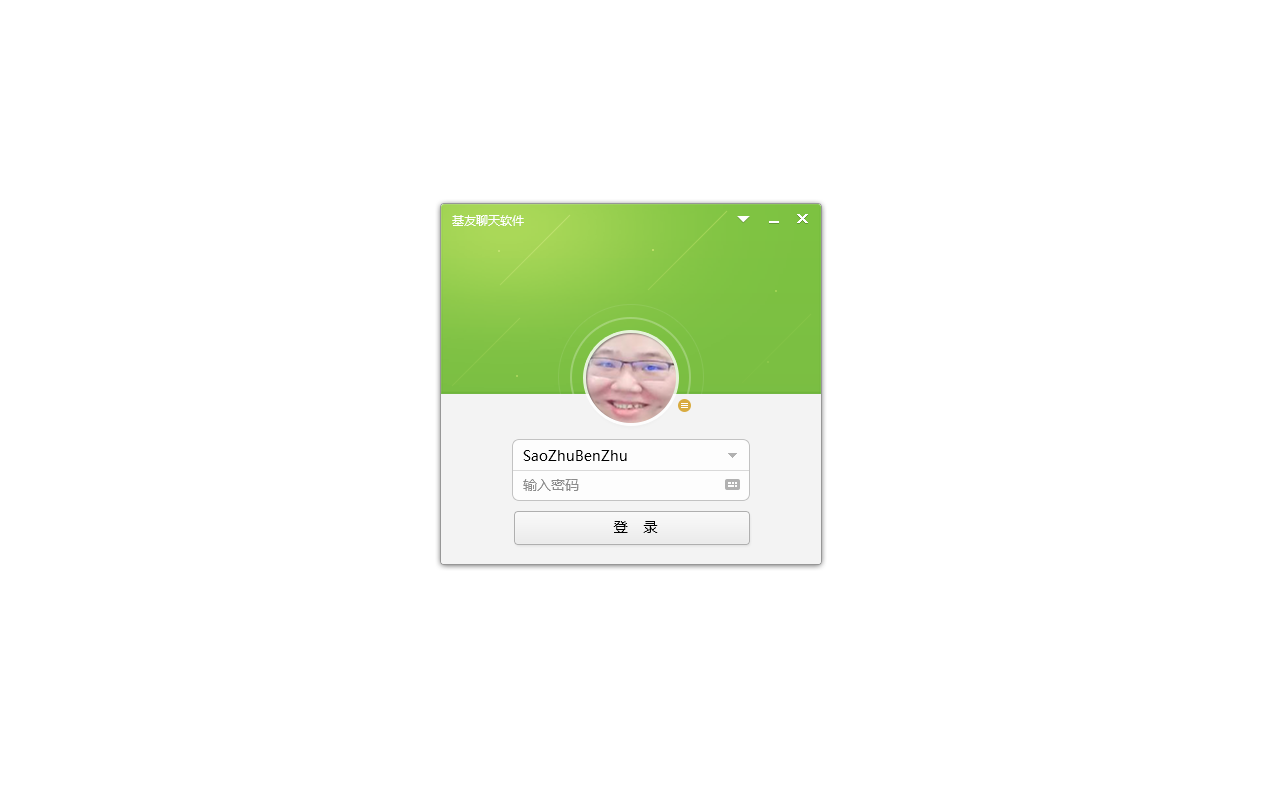
<style>
.page{position:relative;width:1280px;height:800px;background:#ffffff}
.page>*{position:absolute;margin:0}
.t1{font:12px "MicrosoftYaHei";color:#ffffff}
.t2{font:14px "MicrosoftYaHei";color:#000000}
.t3{font:14px "MicrosoftYaHei";color:#8b8b8b}
</style>
<div class="page">
<p class="t1" style="left:452px;top:215px;width:72px;height:11px">基友聊天软件</p>
<p class="t2" style="left:523px;top:450px;width:104px;height:11px">SaoZhuBenZhu</p>
<p class="t3" style="left:523px;top:479px;width:56px;height:12px">输入密码</p>
<p class="t2" style="left:613px;top:521px;width:45px;height:12px">登    录</p>
</div>
